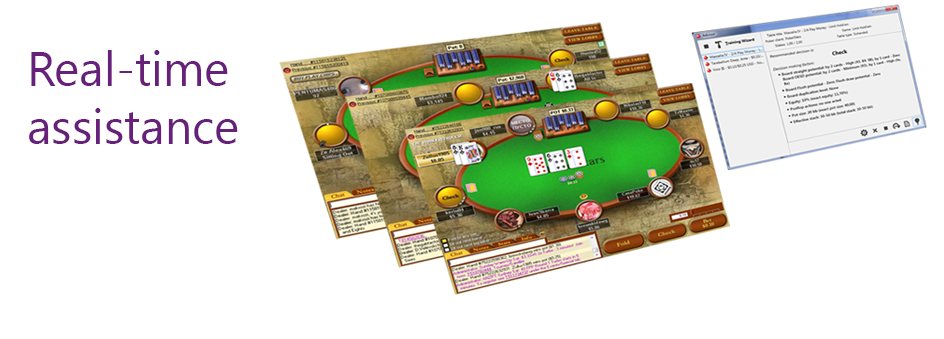
<style>
.page{position:relative;width:944px;height:339px;background:#ffffff}
.page>*{position:absolute;margin:0}
.t1{font:48px "SegoeUI";color:#68217a}
</style>
<div class="page">
<p class="t1" style="left:29px;top:50px;width:209px;height:94px">Real-time<br>assistance</p>
</div>
